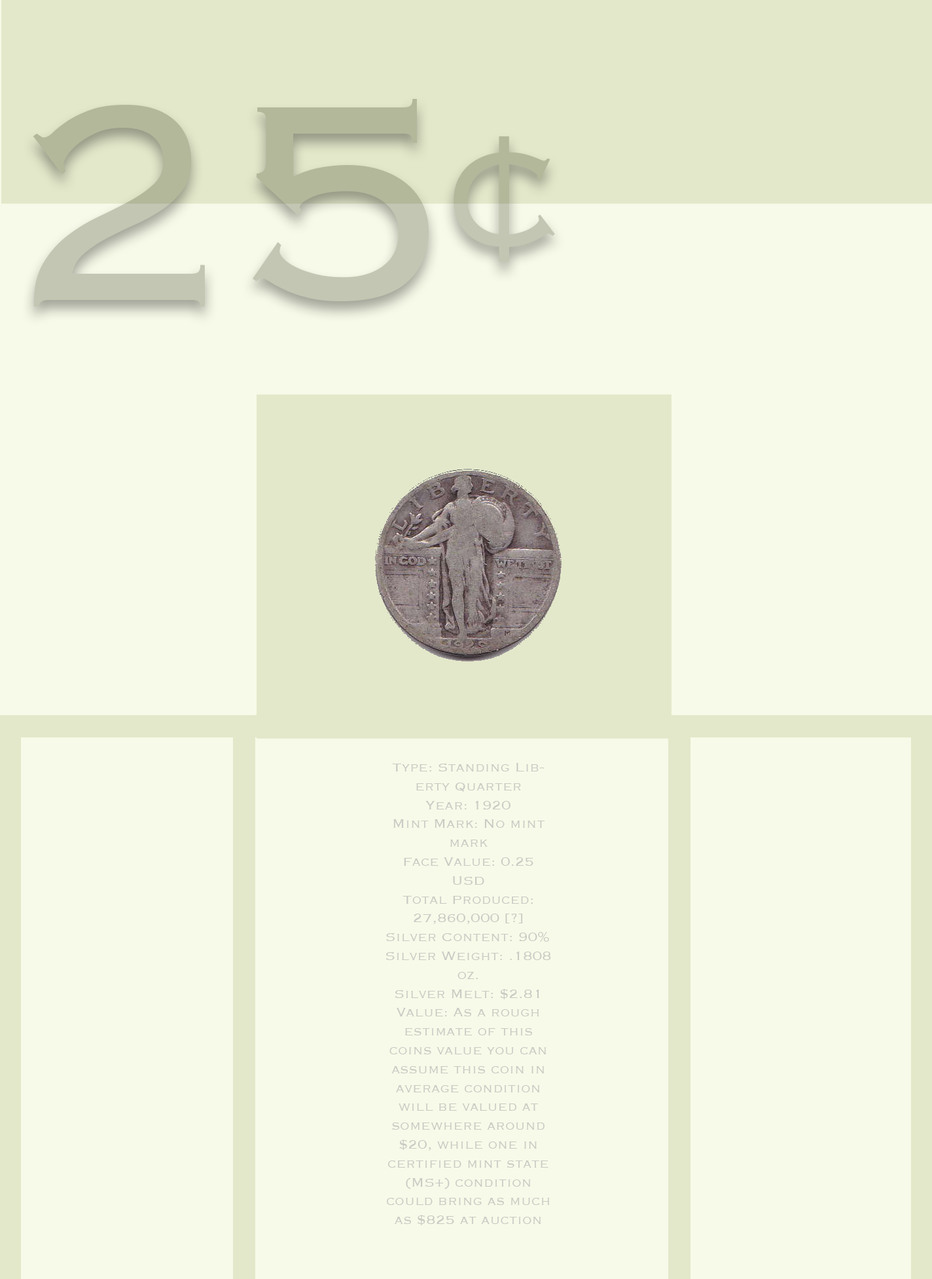
<style>
.page{position:relative;width:932px;height:1279px;background:#f7fae8}
.page>*{position:absolute;margin:0}
.t1{font:365.9px "Copperplate-Light"}
.t2{font:15.7px "Copperplate-Light";color:#c9cac4}
</style>
<div class="page">
<p class="t1" style="left:33px;top:99px;width:396px;height:207px">25</p>
<p class="t2" style="left:386px;top:763px;width:165px;height:462px;text-align:center">Type: Standing Liberty Quarter<br>Year: 1920<br>Mint Mark: No mint mark<br>Face Value: 0.25 USD<br>Total Produced: 27,860,000 [?]<br>Silver Content: 90% <br>Silver Weight: .1808 oz.<br>Silver Melt: $2.81<br>Value: As a rough estimate of this coins value you can assume this coin in average condition will be valued at somewhere around $20, while one in certified mint state (MS+) condition could bring as much as $825 at auction</p>
</div>
